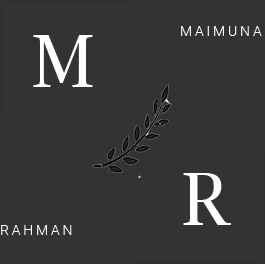
<style>
.page{position:relative;width:265px;height:264px;background:#333333}
.page>*{position:absolute;margin:0}
.t1{font:14px "Roboto-Light";letter-spacing:0.2em;color:#ffffff}
.t2{font:72px "LucidaBright";color:#ffffff}
</style>
<div class="page">
<p class="t1" style="left:181px;top:26px;width:81px;height:10px">MAIMUNA</p>
<p class="t2" style="left:33px;top:35px;width:60px;height:52px">M</p>
<p class="t2" style="left:183px;top:173px;width:48px;height:52px">R</p>
<p class="t1" style="left:1px;top:225px;width:71px;height:10px">RAHMAN</p>
</div>
